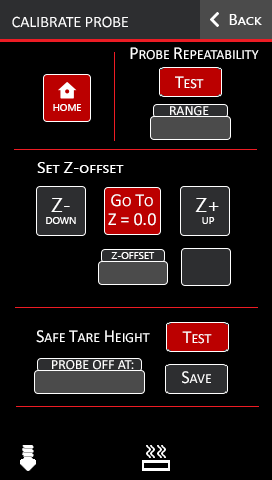
<style>
.page{position:relative;width:272px;height:480px;background:#000000}
.page>*{position:absolute;margin:0}
.t1{font:16px "Calibri";color:#ffffff}
.t2{font:14px "Calibri";color:#ffffff}
.t3{font:18px "Calibri";color:#ffffff}
</style>
<div class="page">
<p class="t1" style="left:12px;top:16px;width:116px;height:12px">CALIBRATE PROBE</p>
<p class="t2" style="left:130px;top:47px;width:129px;height:13px"><span class="t3">P</span>ROBE <span class="t3">R</span>EPEATABILITY</p>
<p class="t2" style="left:175px;top:76px;width:29px;height:13px"><span class="t3">T</span>EST</p>
<p class="t2" style="left:170px;top:106px;width:39px;height:10px">RANGE</p>
<p class="t3" style="left:111px;top:194px;width:42px;height:13px">G<span class="t2">O</span> T<span class="t2">O</span></p>
<p class="t3" style="left:108px;top:213px;width:48px;height:13px">Z = 0.0</p>
<p class="t2" style="left:36px;top:330px;width:114px;height:13px"><span class="t3">S</span>AFE <span class="t3">T</span>ARE <span class="t3">H</span>EIGHT</p>
<p class="t2" style="left:182px;top:331px;width:30px;height:13px"><span class="t3">T</span>EST</p>
<p class="t2" style="left:52px;top:360px;width:82px;height:10px">PROBE OFF AT:</p>
<p class="t2" style="left:182px;top:371px;width:29px;height:13px"><span class="t3">S</span>AVE</p>
</div>
